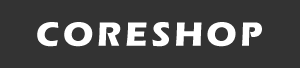
<style>
.page{position:relative;width:300px;height:68px;background:#333333}
.page>*{position:absolute;margin:0}
.t1{font:35px "ErasITC-Bold";letter-spacing:0.1em;color:#ffffff}
</style>
<div class="page">
<p class="t1" style="left:37px;top:22px;width:225px;height:25px">CORESHOP</p>
</div>
